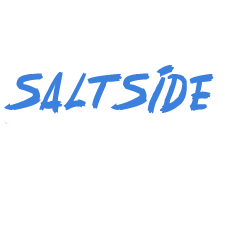
<style>
.page{position:relative;width:225px;height:225px;background:#ffffff}
.page>*{position:absolute;margin:0}
.t1{font:60px "HackatTack";color:#3b80dd}
</style>
<div class="page">
<p class="t1" style="left:4px;top:65px;width:210px;height:49px">saltside</p>
</div>
